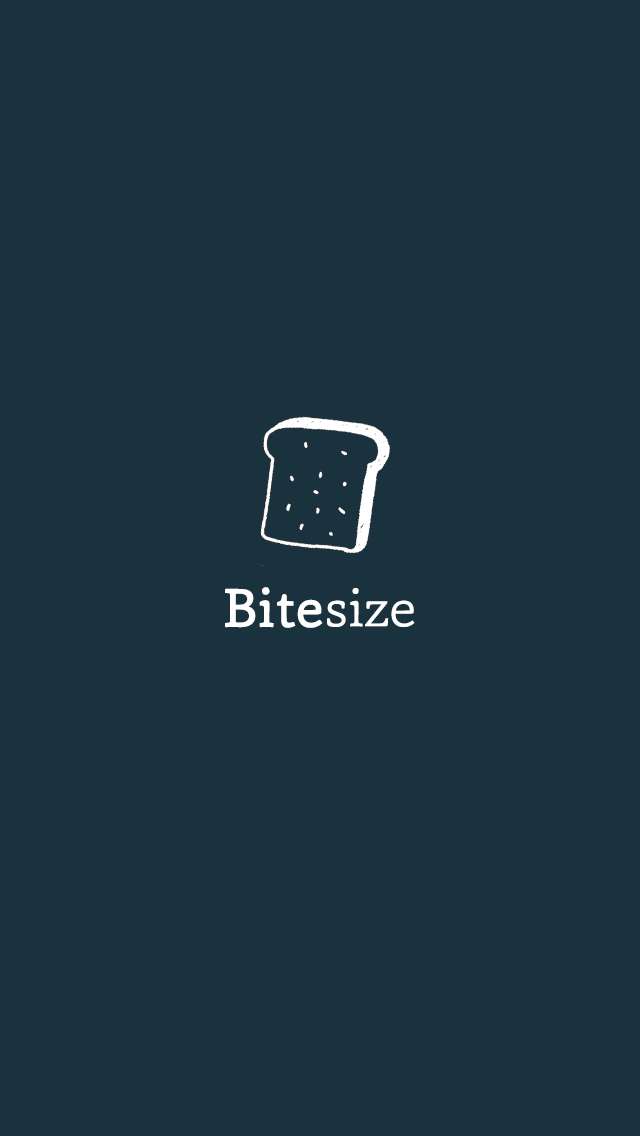
<style>
.page{position:relative;width:640px;height:1136px;background:#1a313e}
.page>*{position:absolute;margin:0}
.t1{font:54px "Capita-Light";color:#ffffff;font-weight:bold}
.t2{font:54px "Capita-Light";color:#ffffff}
</style>
<div class="page">
<p class="t1" style="left:225px;top:587px;width:190px;height:41px">Bite<span class="t2">size</span></p>
</div>
